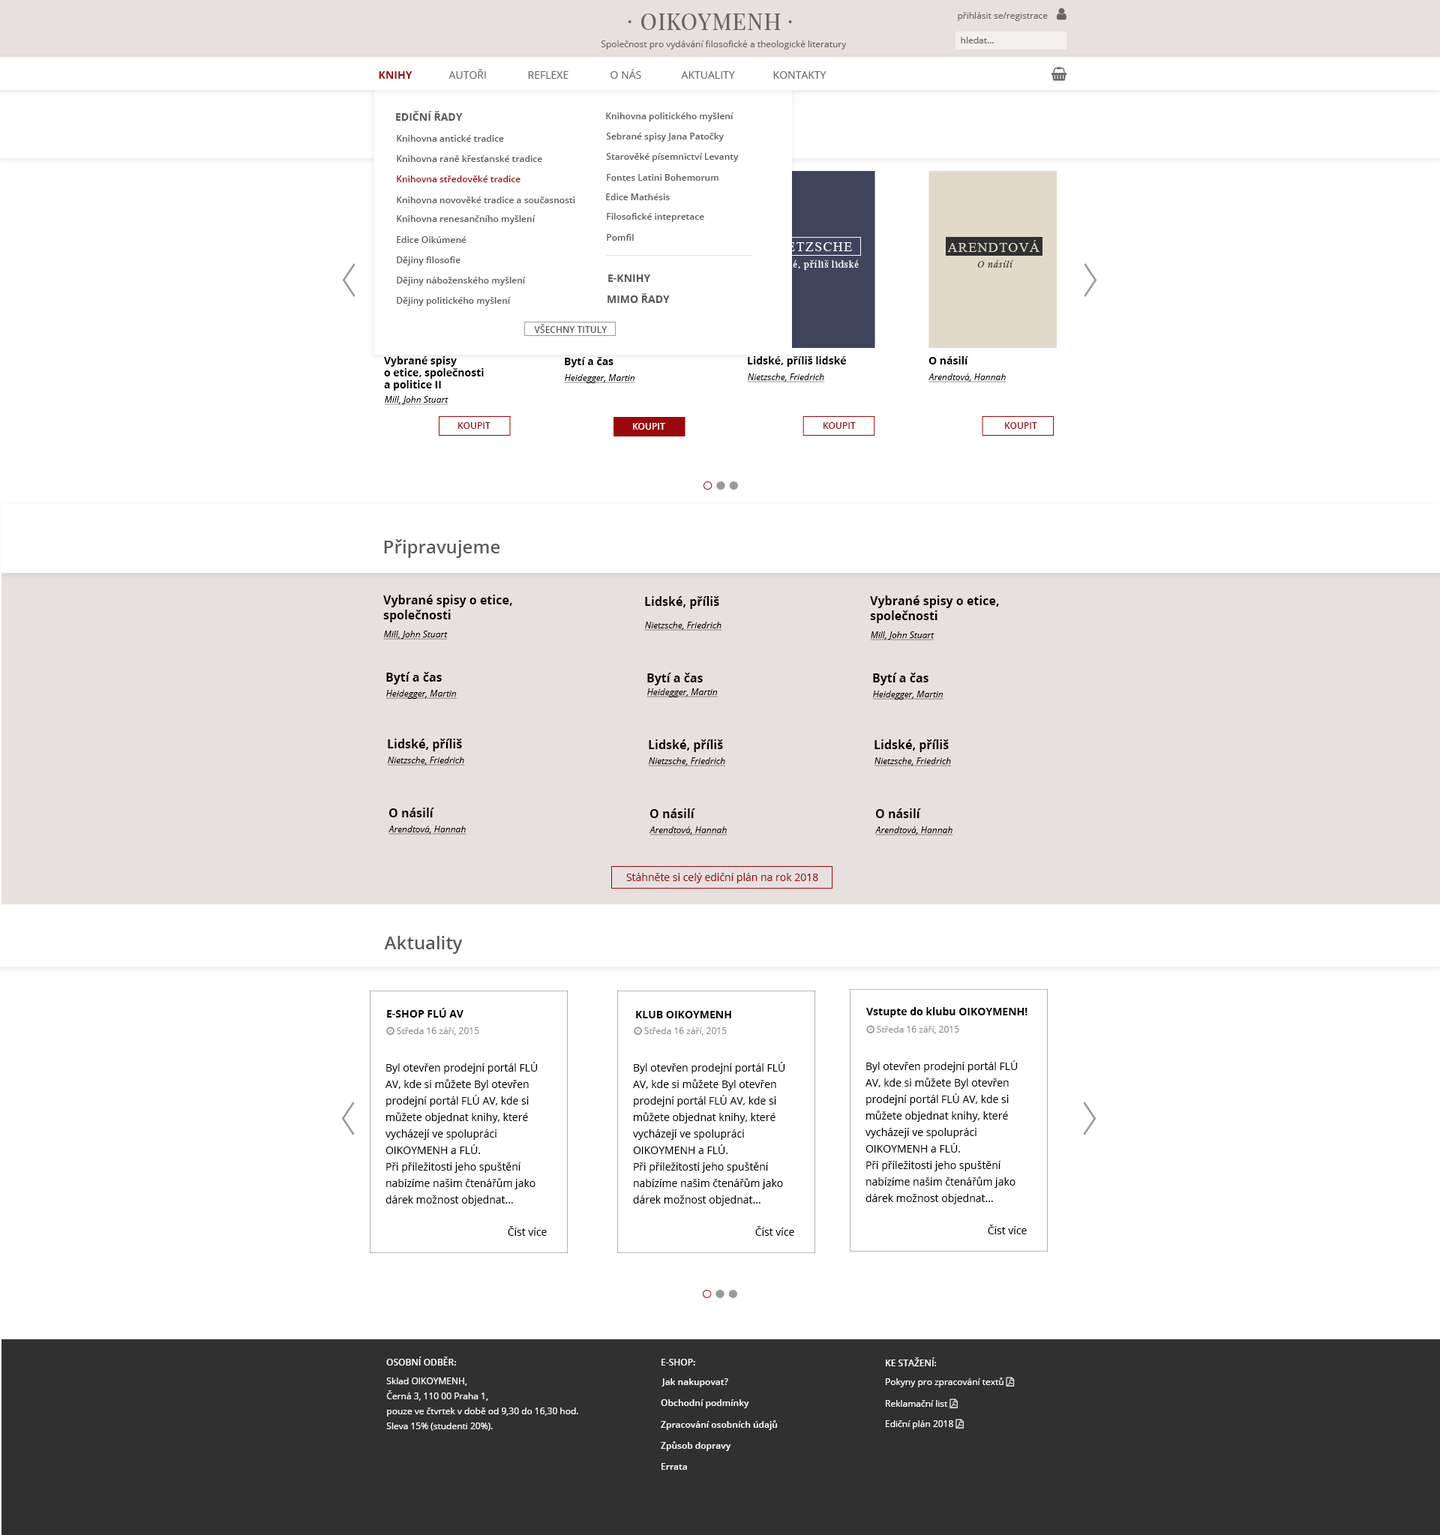
<style>
.page{position:relative;width:1440px;height:1535px;background:#ffffff}
.page>*{position:absolute;margin:0}
.t1{font:22.5px "PlayfairDisplay-Regular";letter-spacing:0.04em;color:#666666}
.t2{font:9px "OpenSans";color:#666666}
.t3{font:22.5px "PlayfairDisplaySC-Regular";letter-spacing:0.04em;color:#666666}
.t4{font:10.5px "OpenSans-Bold";color:#9a080d;text-transform:uppercase}
.t5{font:10.5px "OpenSans";color:#666666;text-transform:uppercase}
.t6{font:10.5px "OpenSans-Bold";color:#595959;text-transform:uppercase}
.t7{font:9px "OpenSans-Semibold";color:#595959}
.t8{font:9px "OpenSans-Semibold";color:#9a080d}
.t9{font:13.5px "TimesNewRomanPSMT";letter-spacing:0.075em;color:#ffffff;text-transform:uppercase}
.t10{font:13.5px "TimesNewRomanPSMT";letter-spacing:0.075em;color:#e1dacb;text-transform:uppercase}
.t11{font:9px "PlayfairDisplay-Regular";letter-spacing:0.075em;color:#ffffff}
.t12{font:9px "PlayfairDisplay-Italic";letter-spacing:0.075em;color:#303030}
.t13{font:9px "OpenSans-Semibold";color:#595959;text-transform:uppercase}
.t14{font:10.5px/12px "OpenSans-Bold";color:#000000}
.t15{font:10.5px "OpenSans-Bold";color:#000000}
.t16{font:9px "OpenSans-Italic";color:#000000;text-decoration:underline}
.t17{font:9px "OpenSans-Semibold";color:#9a080d;text-transform:uppercase}
.t18{font:9px "OpenSans-Semibold";color:#ffffff;text-transform:uppercase}
.t19{font:18px "OpenSans-Semibold";color:#595959}
.t20{font:12px/15px "OpenSans-Bold";color:#000000}
.t21{font:12px "OpenSans-Bold";color:#000000}
.t22{font:10.5px "OpenSans";color:#9a080d}
.t23{font:10.5px/16.5px "OpenSans";color:#000000}
.t24{font:10.5px "OpenSans";color:#000000}
.t25{font:9px/15px "OpenSans";color:#ffffff}
.t26{font:9px "OpenSans-Semibold";color:#ffffff}
</style>
<div class="page">
<p class="t1" style="left:641px;top:14px;width:140px;height:16px">OIKOYMENH</p>
<p class="t2" style="left:958px;top:12px;width:90px;height:9px">přihlásit se/registrace</p>
<p class="t3" style="left:628px;top:20px;width:4px;height:3px">·</p>
<p class="t3" style="left:788px;top:20px;width:4px;height:3px">·</p>
<p class="t2" style="left:601px;top:40px;width:246px;height:10px">Společnost pro vydávání filosofické a theologické literatury</p>
<p class="t2" style="left:961px;top:37px;width:33px;height:7px">hledat...</p>
<p class="t4" style="left:379px;top:71px;width:33px;height:8px">Knihy</p>
<p class="t5" style="left:448px;top:69px;width:38px;height:10px">autoři</p>
<p class="t5" style="left:528px;top:71px;width:40px;height:8px">reflexe</p>
<p class="t5" style="left:610px;top:69px;width:31px;height:10px">o nás</p>
<p class="t5" style="left:681px;top:71px;width:54px;height:8px">Aktuality</p>
<p class="t5" style="left:773px;top:71px;width:53px;height:8px">kontakty</p>
<p class="t6" style="left:396px;top:111px;width:67px;height:10px">ediční řady</p>
<p class="t7" style="left:606px;top:112px;width:128px;height:10px">Knihovna politického myšlení</p>
<p class="t7" style="left:397px;top:135px;width:107px;height:7px">Knihovna antické tradice</p>
<p class="t7" style="left:606px;top:133px;width:118px;height:9px">Sebrané spisy Jana Patočky</p>
<p class="t7" style="left:397px;top:155px;width:145px;height:7px">Knihovna raně křesťanské tradice</p>
<p class="t7" style="left:606px;top:153px;width:133px;height:9px">Starověké písemnictví Levanty</p>
<p class="t7" style="left:607px;top:174px;width:111px;height:7px">Fontes Latini Bohemorum</p>
<p class="t8" style="left:397px;top:176px;width:123px;height:6px">Knihovna středověké tradice</p>
<p class="t7" style="left:397px;top:196px;width:178px;height:7px">Knihovna novověké tradice a současnosti</p>
<p class="t7" style="left:606px;top:194px;width:64px;height:6px">Edice Mathésis</p>
<p class="t7" style="left:397px;top:215px;width:139px;height:9px">Knihovna renesančního myšlení</p>
<p class="t7" style="left:607px;top:213px;width:97px;height:9px">Filosofické intepretace</p>
<p class="t7" style="left:397px;top:236px;width:69px;height:7px">Edice Oikúmené</p>
<p class="t7" style="left:607px;top:234px;width:27px;height:7px">Pomfil</p>
<p class="t9" style="left:770px;top:242px;width:82px;height:9px">Nietzsche</p>
<p class="t10" style="left:947px;top:240px;width:93px;height:12px">Arendtová</p>
<p class="t7" style="left:397px;top:256px;width:63px;height:10px">Dějiny filosofie</p>
<p class="t11" style="left:767px;top:260px;width:92px;height:10px">Lidské, příliš lidské</p>
<p class="t12" style="left:977px;top:260px;width:36px;height:8px">O násilí</p>
<p class="t7" style="left:397px;top:277px;width:129px;height:9px">Dějiny náboženského myšlení</p>
<p class="t6" style="left:608px;top:274px;width:43px;height:8px">e-knihy</p>
<p class="t6" style="left:608px;top:293px;width:62px;height:10px">mimo řady</p>
<p class="t7" style="left:397px;top:297px;width:114px;height:9px">Dějiny politického myšlení</p>
<p class="t13" style="left:534px;top:324px;width:74px;height:9px">VŠECHNY TITULY</p>
<p class="t14" style="left:384px;top:356px;width:100px;height:35px">Vybrané spisy <br>o etice, společnosti <br>a politice II</p>
<p class="t15" style="left:565px;top:357px;width:49px;height:11px">Bytí a čas</p>
<p class="t15" style="left:748px;top:356px;width:98px;height:11px">Lidské, příliš lidské</p>
<p class="t15" style="left:928px;top:356px;width:41px;height:8px">O násilí</p>
<p class="t16" style="left:564px;top:374px;width:71px;height:9px">Heidegger, Martin</p>
<p class="t16" style="left:747px;top:374px;width:78px;height:8px">Nietzsche, Friedrich</p>
<p class="t16" style="left:928px;top:374px;width:78px;height:8px">Arendtová, Hannah</p>
<p class="t16" style="left:384px;top:396px;width:64px;height:9px">Mill, John Stuart</p>
<p class="t17" style="left:458px;top:422px;width:32px;height:7px">koupit</p>
<p class="t18" style="left:633px;top:423px;width:32px;height:7px">koupit</p>
<p class="t17" style="left:824px;top:422px;width:32px;height:7px">koupit</p>
<p class="t17" style="left:1005px;top:422px;width:32px;height:7px">koupit</p>
<p class="t19" style="left:384px;top:539px;width:116px;height:19px">Připravujeme</p>
<p class="t20" style="left:383px;top:595px;width:129px;height:27px">Vybrané spisy o etice, společnosti <br>a politice II</p>
<p class="t21" style="left:645px;top:596px;width:74px;height:13px">Lidské, příliš lidské</p>
<p class="t20" style="left:870px;top:596px;width:129px;height:27px">Vybrané spisy o etice, společnosti <br>a politice II</p>
<p class="t16" style="left:644px;top:622px;width:78px;height:9px">Nietzsche, Friedrich</p>
<p class="t16" style="left:383px;top:631px;width:65px;height:9px">Mill, John Stuart</p>
<p class="t16" style="left:870px;top:632px;width:64px;height:8px">Mill, John Stuart</p>
<p class="t21" style="left:386px;top:672px;width:56px;height:13px">Bytí a čas</p>
<p class="t21" style="left:647px;top:673px;width:56px;height:13px">Bytí a čas</p>
<p class="t21" style="left:873px;top:673px;width:55px;height:13px">Bytí a čas</p>
<p class="t16" style="left:646px;top:688px;width:72px;height:10px">Heidegger, Martin</p>
<p class="t16" style="left:386px;top:690px;width:71px;height:9px">Heidegger, Martin</p>
<p class="t16" style="left:872px;top:691px;width:72px;height:9px">Heidegger, Martin</p>
<p class="t21" style="left:388px;top:739px;width:74px;height:13px">Lidské, příliš lidské</p>
<p class="t21" style="left:649px;top:740px;width:74px;height:12px">Lidské, příliš lidské</p>
<p class="t21" style="left:874px;top:740px;width:75px;height:12px">Lidské, příliš lidské</p>
<p class="t16" style="left:387px;top:757px;width:78px;height:9px">Nietzsche, Friedrich</p>
<p class="t16" style="left:648px;top:758px;width:78px;height:8px">Nietzsche, Friedrich</p>
<p class="t16" style="left:874px;top:758px;width:78px;height:8px">Nietzsche, Friedrich</p>
<p class="t21" style="left:389px;top:808px;width:45px;height:10px">O násilí</p>
<p class="t21" style="left:650px;top:808px;width:45px;height:10px">O násilí</p>
<p class="t21" style="left:876px;top:808px;width:45px;height:10px">O násilí</p>
<p class="t16" style="left:388px;top:826px;width:78px;height:9px">Arendtová, Hannah</p>
<p class="t16" style="left:650px;top:826px;width:78px;height:10px">Arendtová, Hannah</p>
<p class="t16" style="left:875px;top:826px;width:78px;height:10px">Arendtová, Hannah</p>
<p class="t22" style="left:626px;top:873px;width:192px;height:11px">Stáhněte si celý ediční plán na rok 2018</p>
<p class="t19" style="left:384px;top:936px;width:79px;height:18px">Aktuality</p>
<p class="t15" style="left:387px;top:1008px;width:77px;height:10px">E-SHOP FLÚ AV</p>
<p class="t15" style="left:636px;top:1011px;width:95px;height:7px">KLUB OIKOYMENH</p>
<p class="t15" style="left:866px;top:1007px;width:162px;height:11px">Vstupte do klubu OIKOYMENH!</p>
<p class="t23" style="left:386px;top:1062px;width:152px;height:144px">Byl otevřen prodejní portál FLÚ AV, kde si můžete Byl otevřen prodejní portál FLÚ AV, kde si můžete objednat knihy, které vycházejí ve spolupráci OIKOYMENH a FLÚ. <br>Při příležitosti jeho spuštění nabízíme našim čtenářům jako dárek možnost objednat... kterévycházejí ve spolupráci OIKOYMENH a FLÚ. Při příležitosti jeho spuštění nabízíme...</p>
<p class="t23" style="left:633px;top:1062px;width:152px;height:144px">Byl otevřen prodejní portál FLÚ AV, kde si můžete Byl otevřen prodejní portál FLÚ AV, kde si můžete objednat knihy, které vycházejí ve spolupráci OIKOYMENH a FLÚ. <br>Při příležitosti jeho spuštění nabízíme našim čtenářům jako dárek možnost objednat... kterévycházejí ve spolupráci OIKOYMENH a FLÚ. Při příležitosti jeho spuštění nabízíme...</p>
<p class="t23" style="left:866px;top:1060px;width:152px;height:144px">Byl otevřen prodejní portál FLÚ AV, kde si můžete Byl otevřen prodejní portál FLÚ AV, kde si můžete objednat knihy, které vycházejí ve spolupráci OIKOYMENH a FLÚ. <br>Při příležitosti jeho spuštění nabízíme našim čtenářům jako dárek možnost objednat... kterévycházejí ve spolupráci OIKOYMENH a FLÚ. Při příležitosti jeho spuštění nabízíme...</p>
<p class="t24" style="left:508px;top:1226px;width:39px;height:10px">Číst více</p>
<p class="t24" style="left:755px;top:1226px;width:39px;height:10px">Číst více</p>
<p class="t24" style="left:988px;top:1225px;width:39px;height:9px">Číst více</p>
<p class="t18" style="left:386px;top:1357px;width:70px;height:9px">OSOBNÍ ODBĚR:</p>
<p class="t18" style="left:662px;top:1359px;width:33px;height:7px">e-shop:</p>
<p class="t18" style="left:886px;top:1358px;width:50px;height:8px">Ke stažení:</p>
<p class="t25" style="left:386px;top:1378px;width:192px;height:53px">Sklad OIKOYMENH,<br>Černá 3, 110 00 Praha 1,<br>pouze ve čtvrtek v době od 9,30 do 16,30 hod.<br>Sleva 15% (studenti 20%).</p>
<p class="t26" style="left:662px;top:1378px;width:66px;height:10px"><span class="t18">J</span>ak nakupovat?</p>
<p class="t26" style="left:661px;top:1400px;width:88px;height:8px">Obchodní podmínky</p>
<p class="t26" style="left:661px;top:1420px;width:116px;height:10px">Zpracování osobních údajů</p>
<p class="t26" style="left:661px;top:1442px;width:70px;height:9px">Způsob dopravy</p>
<p class="t26" style="left:662px;top:1463px;width:25px;height:7px">Errata</p>
</div>
